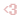
<style>
.page{position:relative;width:20px;height:20px;background:#fefefe}
.page>*{position:absolute;margin:0}
.t1{font:9.1px "Fixedsys";color:#e6b5b5}
.t2{font:16px "Fixedsys";color:#e6b5b5}
</style>
<div class="page">
<p class="t1" style="left:3px;top:6px;width:6px;height:7px;rotate:180deg">&lt;</p>
<p class="t2" style="left:9px;top:3px;width:8px;height:12px">3</p>
</div>
